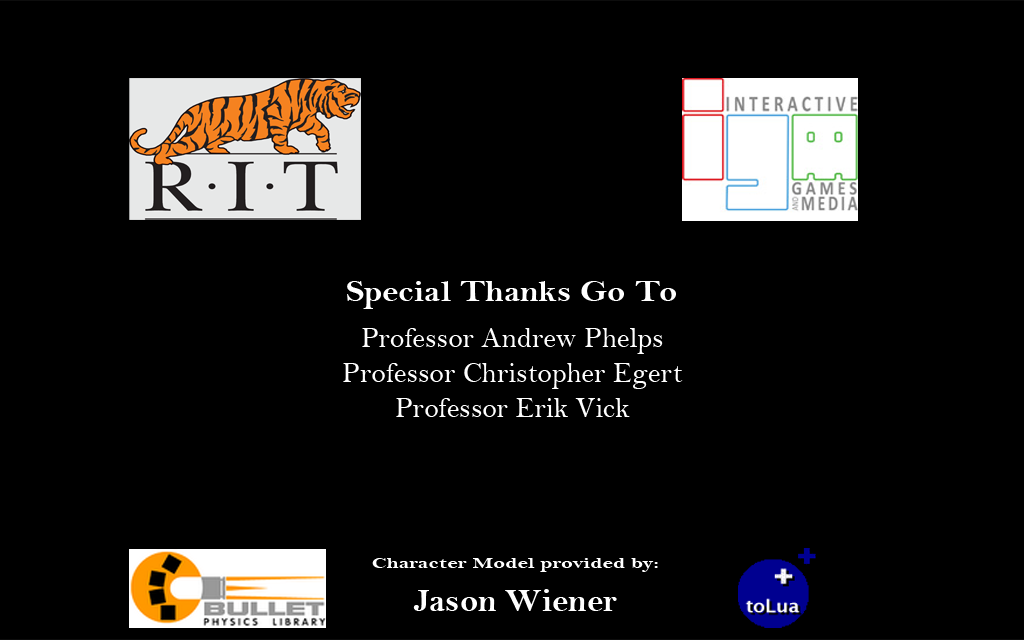
<style>
.page{position:relative;width:1024px;height:640px;background:#000000}
.page>*{position:absolute;margin:0}
.t1{font:31.2px "BellMTBold";color:#ffffff;scale:1.08 1}
.t2{font:29.2px "BellMT";color:#ffffff}
.t3{font:15.6px "BellMTBold";color:#ffffff;scale:1.41 1}
.t4{font:33.3px "BellMTBold";color:#ffffff}
</style>
<div class="page">
<p class="t1" style="left:347px;top:281px;width:329px;height:28px">Special Thanks Go To</p>
<p class="t2" style="left:343px;top:328px;width:340px;height:89px;text-align:center">Professor Andrew Phelps<br>Professor Christopher Egert<br>Professor Erik Vick</p>
<p class="t3" style="left:372px;top:558px;width:286px;height:14px">Character Model provided by:</p>
<p class="t4" style="left:413px;top:589px;width:204px;height:22px">Jason Wiener</p>
</div>
